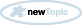
<style>
.page{position:relative;width:82px;height:25px;background:#ffffff}
.page>*{position:absolute;margin:0}
.t1{font:9px "Arial-BoldMT";color:#cadce7}
.t2{font:9px "Arial-BoldMT";color:#000000}
</style>
<div class="page">
<p class="t1" style="left:28px;top:8px;width:40px;height:9px"><span class="t2">new</span>Topic</p>
</div>
